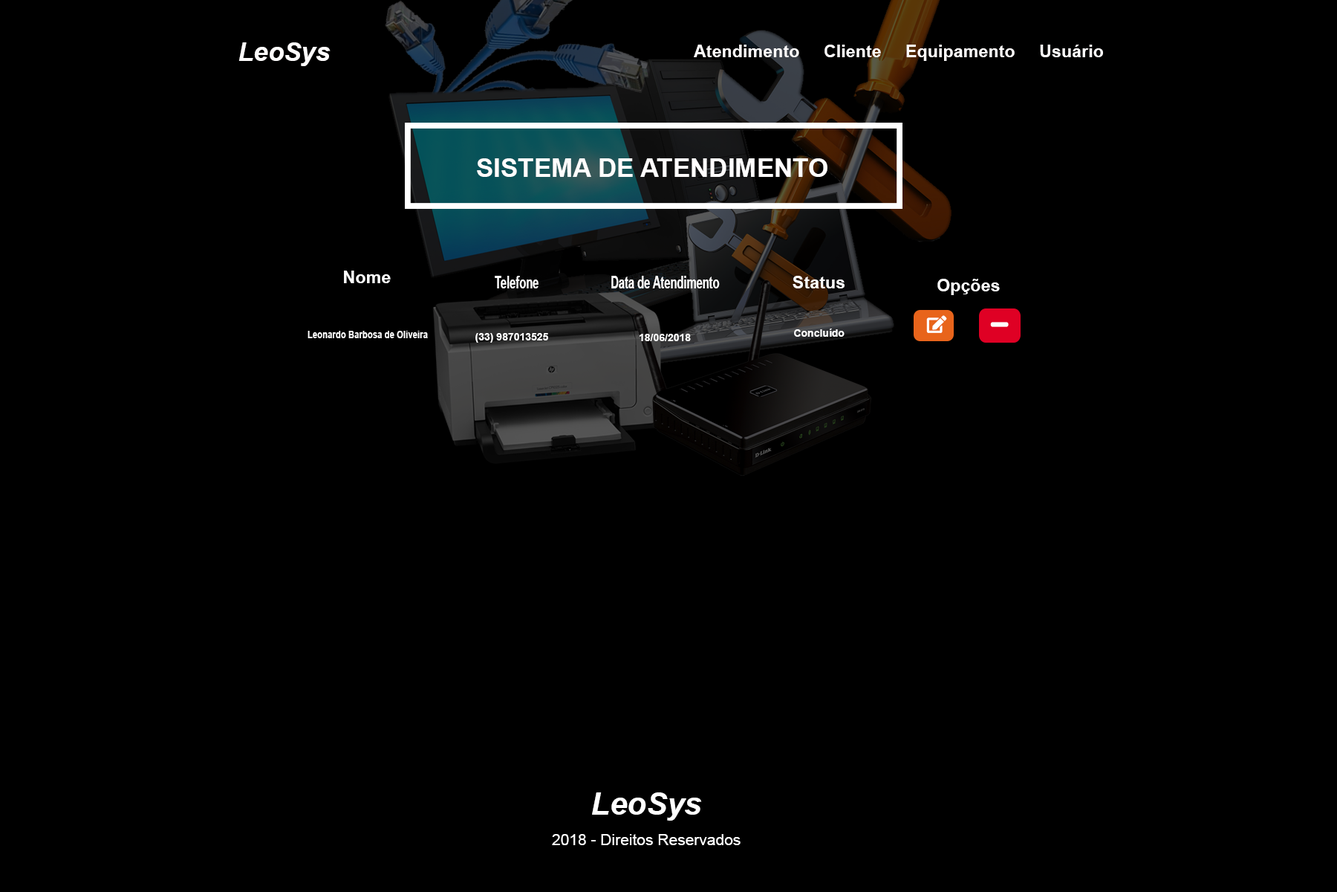
<style>
.page{position:relative;width:1337px;height:892px;background:#000000}
.page>*{position:absolute;margin:0}
.t1{font:44.6px "Arial-BoldItalicMT";color:#fffdfd}
.t2{font:29.7px "Arial-BoldMT";color:#fffdfd}
.t3{font:44.6px "Arial-BoldMT";color:#fffdfd}
.t4{font:29.7px "Arial-BoldMT";color:#ffffff}
.t5{font:29.7px "Arial-BoldMT";color:#ffffff;scale:0.63 1}
.t6{font:17.8px "Arial-BoldMT";color:#ffffff}
.t7{font:17.6px "Arial-BoldMT";color:#ffffff;scale:0.83 1}
.t8{font:53.5px "Arial-BoldItalicMT";color:#ffffff}
.t9{font:26.7px "ArialMT";color:#ffffff}
</style>
<div class="page">
<p class="t1" style="left:239px;top:42px;width:92px;height:24px">LeoSys</p>
<p class="t2" style="left:694px;top:45px;width:409px;height:16px">Atendimento     Cliente     Equipamento     Usuário</p>
<p class="t3" style="left:477px;top:158px;width:351px;height:19px">SISTEMA DE ATENDIMENTO</p>
<p class="t4" style="left:344px;top:270px;width:47px;height:13px">Nome</p>
<p class="t5" style="left:495px;top:276px;width:44px;height:12px">Telefone</p>
<p class="t5" style="left:611px;top:276px;width:109px;height:12px">Data de Atendimento</p>
<p class="t4" style="left:793px;top:276px;width:52px;height:12px">Status</p>
<p class="t4" style="left:938px;top:279px;width:62px;height:16px">Opções</p>
<p class="t6" style="left:794px;top:328px;width:51px;height:9px">Concluído</p>
<p class="t7" style="left:308px;top:331px;width:120px;height:7px">Leonardo Barbosa de Oliveira</p>
<p class="t6" style="left:476px;top:333px;width:72px;height:10px">(33) 987013525</p>
<p class="t6" style="left:640px;top:334px;width:51px;height:7px">18/06/2018</p>
<p class="t8" style="left:592px;top:792px;width:110px;height:28px">LeoSys</p>
<p class="t9" style="left:552px;top:834px;width:189px;height:11px">2018 - Direitos Reservados</p>
</div>
